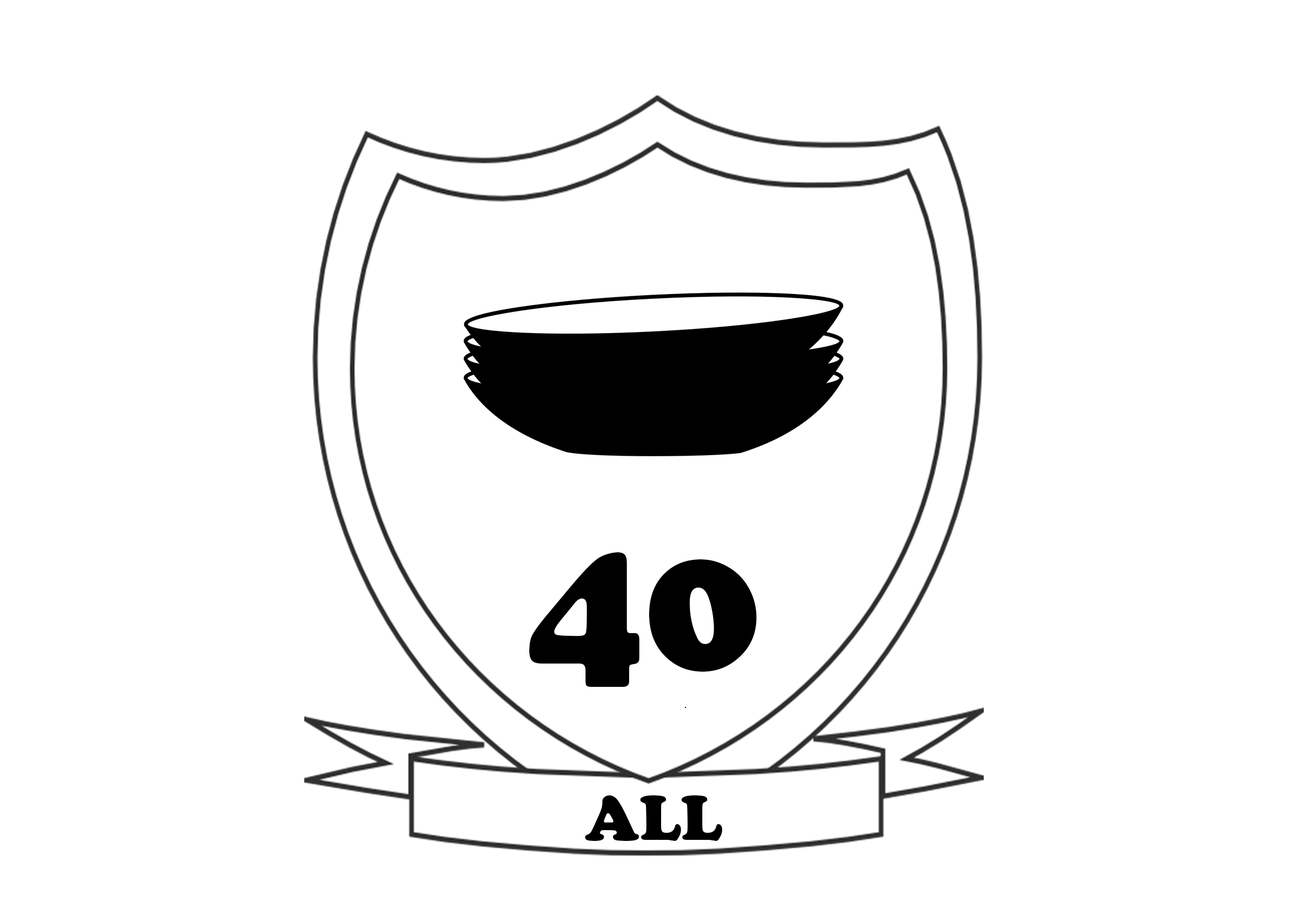
<style>
.page{position:relative;width:1307px;height:912px;background:#ffffff}
.page>*{position:absolute;margin:0}
.t1{font:195.3px "CooperBlack";color:#000000}
.t2{font:65.1px "CooperBlack";color:#000000}
</style>
<div class="page">
<p class="t1" style="left:530px;top:552px;width:227px;height:135px">40</p>
<p class="t2" style="left:585px;top:795px;width:138px;height:46px">ALL</p>
</div>
